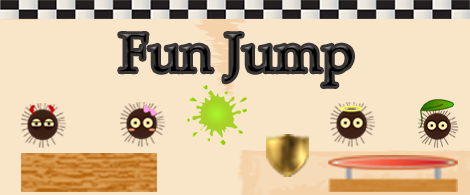
<style>
.page{position:relative;width:470px;height:195px;background:#f9e5c8}
.page>*{position:absolute;margin:0}
.t1{font:53.4px "PalatinoLinotype-Roman";color:#000000}
</style>
<div class="page">
<p class="t1" style="left:120px;top:34px;width:232px;height:52px">Fun Jump</p>
</div>
